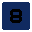
<style>
.page{position:relative;width:32px;height:32px;background:#102a60}
.page>*{position:absolute;margin:0}
.t1{font:21px "Nasalization";color:#000000}
</style>
<div class="page">
<p class="t1" style="left:10px;top:9px;width:12px;height:14px">8</p>
</div>
